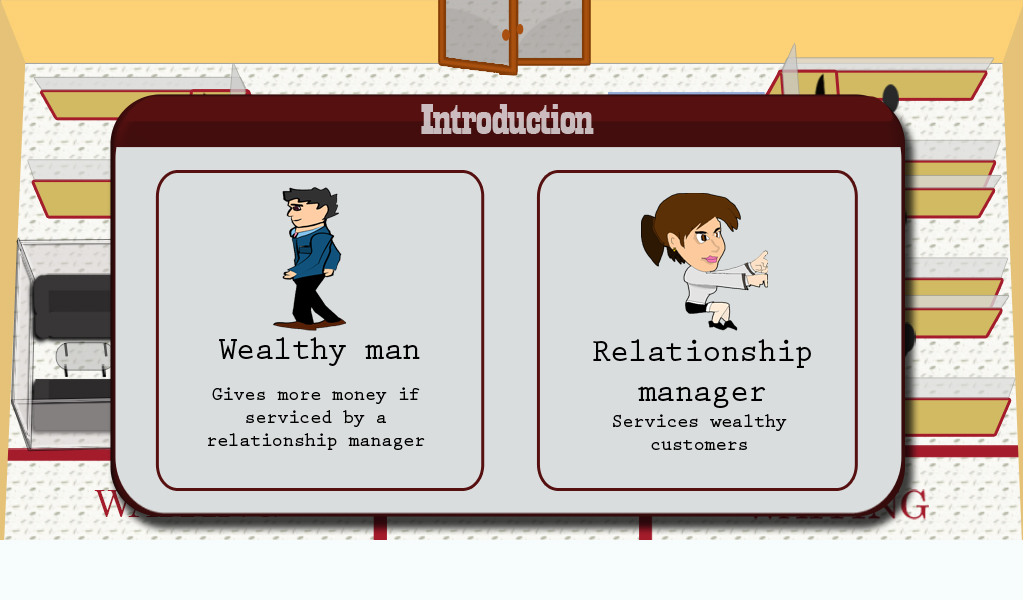
<style>
.page{position:relative;width:1024px;height:600px;background:#daddde}
.page>*{position:absolute;margin:0}
.t1{font:44.6px "Playbill";letter-spacing:-0.025em;color:#c8bbbe;scale:1.61 1}
.t2{font:33.2px "PrestigeEliteStd-Bd";letter-spacing:-0.025em;color:#000000;scale:0.97 1}
.t3{font:19px "PrestigeEliteStd-Bd";letter-spacing:-0.025em;color:#000000}
</style>
<div class="page">
<p class="t1" style="left:421px;top:104px;width:173px;height:30px">Introduction</p>
<p class="t2" style="left:219px;top:337px;width:201px;height:29px">Wealthy man</p>
<p class="t2" style="left:593px;top:339px;width:218px;height:69px;text-align:center">Relationship<br>manager</p>
<p class="t3" style="left:208px;top:387px;width:217px;height:63px;text-align:center">Gives more money if serviced by a relationship manager</p>
<p class="t3" style="left:613px;top:414px;width:174px;height:36px;text-align:center">Services wealthy customers</p>
</div>
